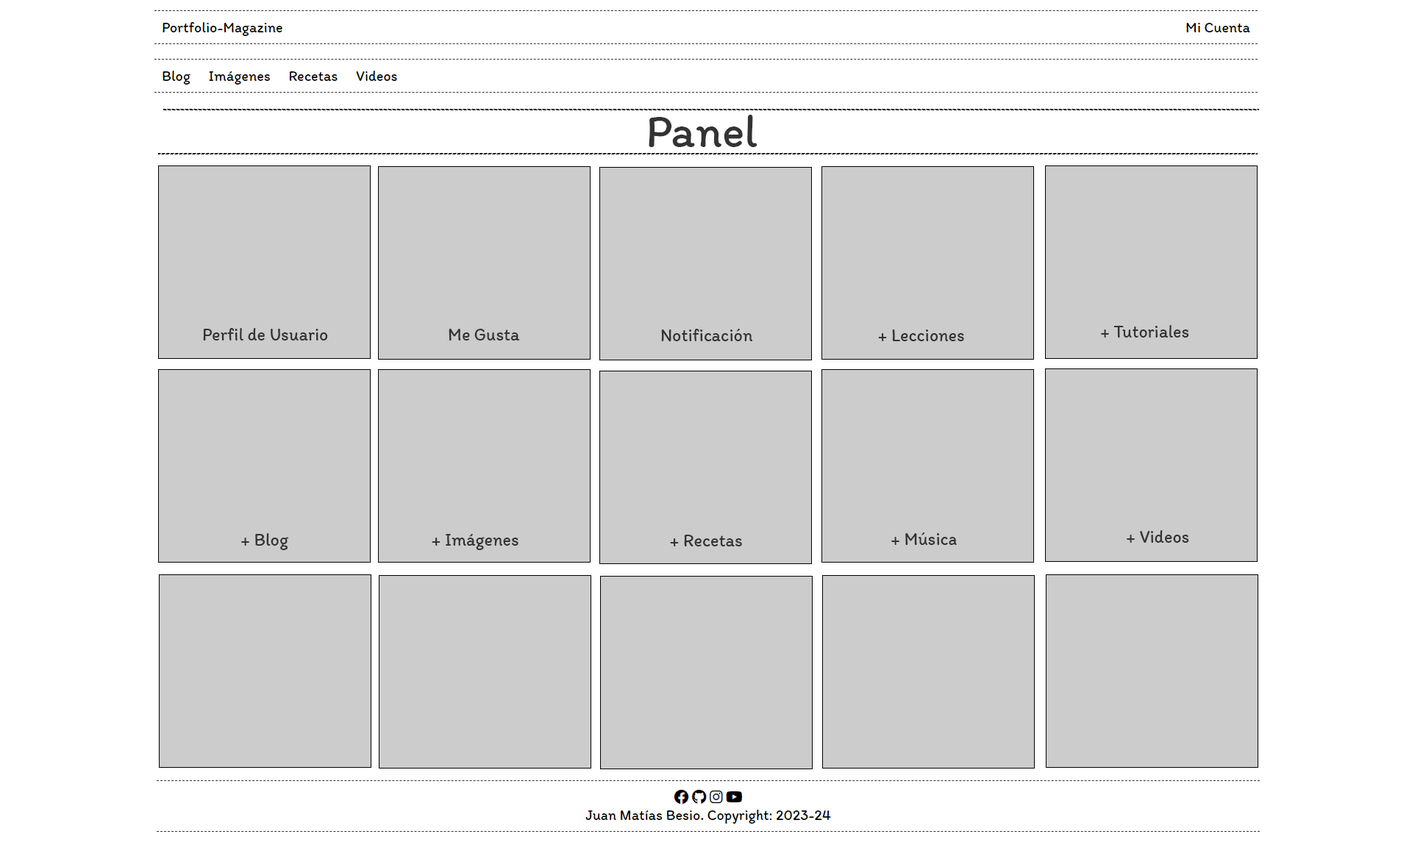
<style>
.page{position:relative;width:1412px;height:845px;background:#cccccc}
.page>*{position:absolute;margin:0}
.t1{font:47.1px "Itim-Regular";color:#333333}
.t2{font:17.6px "Itim-Regular";color:#333333}
</style>
<div class="page">
<p class="t1" style="left:648px;top:115px;width:109px;height:32px">Panel</p>
<p class="t2" style="left:203px;top:328px;width:125px;height:12px">Perfil de Usuario</p>
<p class="t2" style="left:448px;top:329px;width:72px;height:11px">Me Gusta</p>
<p class="t2" style="left:661px;top:329px;width:92px;height:12px">Notificación</p>
<p class="t2" style="left:878px;top:329px;width:86px;height:12px">+ Lecciones</p>
<p class="t2" style="left:1101px;top:325px;width:88px;height:12px">+ Tutoriales</p>
<p class="t2" style="left:241px;top:533px;width:48px;height:17px">+ Blog</p>
<p class="t2" style="left:432px;top:534px;width:86px;height:16px">+ Imágenes</p>
<p class="t2" style="left:891px;top:532px;width:65px;height:13px">+ Música</p>
<p class="t2" style="left:1126px;top:530px;width:63px;height:13px">+ Videos</p>
<p class="t2" style="left:670px;top:534px;width:72px;height:12px">+ Recetas</p>
</div>
